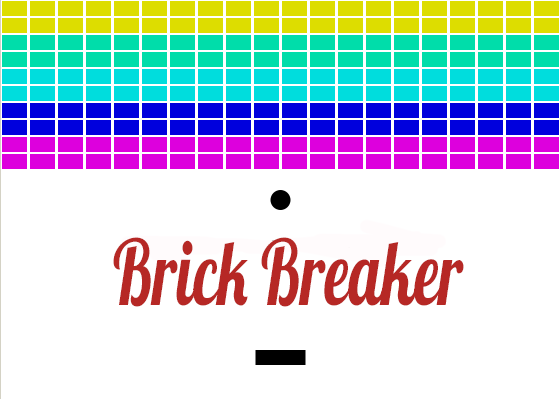
<style>
.page{position:relative;width:560px;height:399px;background:#ffffff}
.page>*{position:absolute;margin:0}
.t1{font:90px "Lobster1.4";color:#b62825;scale:0.7 1}
</style>
<div class="page">
<p class="t1" style="left:113px;top:237px;width:351px;height:70px">Brick Breaker</p>
</div>
